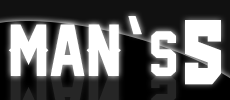
<style>
.page{position:relative;width:230px;height:100px;background:#ffffff}
.page>*{position:absolute;margin:0}
.t1{font:67.1px "Corbel-Bold";color:#ffffff}
.t2{font:67.1px "LegendM54";color:#ffffff}
.t3{font:106.8px "OldSchoolUnitedRegular";color:#ffffff;scale:0.82 1}
.t4{font:58.3px "LegendM54";color:#ffffff}
</style>
<div class="page">
<p class="t1" style="left:128px;top:16px;width:14px;height:19px">‘</p>
<p class="t2" style="left:8px;top:24px;width:113px;height:52px">Man</p>
<p class="t3" style="left:185px;top:20px;width:36px;height:65px">5</p>
<p class="t4" style="left:151px;top:31px;width:25px;height:45px">S</p>
</div>
